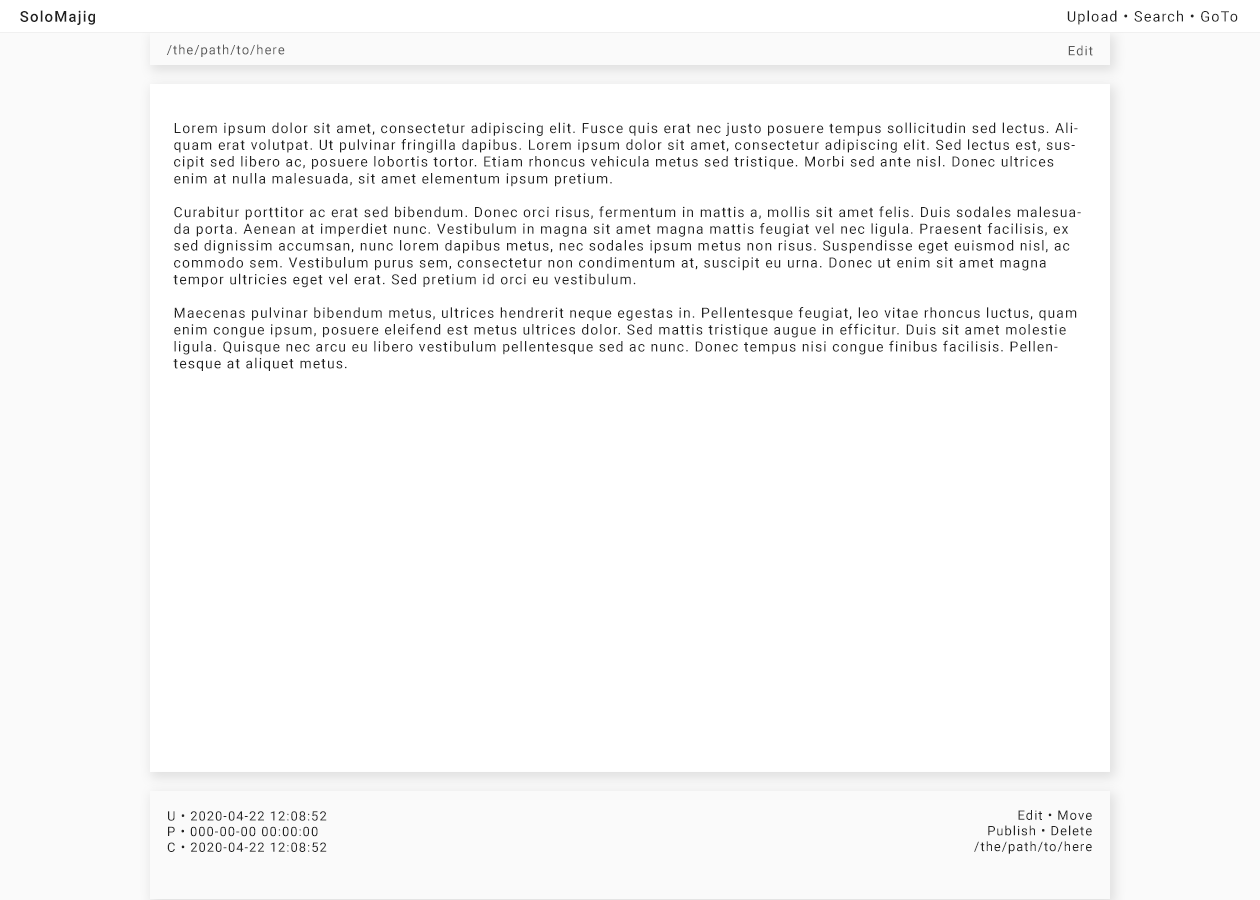
<style>
.page{position:relative;width:1260px;height:900px;background:#ffffff}
.page>*{position:absolute;margin:0}
.t1{font:15px "Roboto-Medium";letter-spacing:0.075em;color:#212121}
.t2{font:14.5px "Roboto-Regular";letter-spacing:0.075em;color:#212121}
.t3{font:13px "Roboto-Regular";letter-spacing:0.075em;color:#595959}
.t4{font:14px "Roboto-Regular";letter-spacing:0.075em;color:#212121}
.t5{font:13px "Roboto-Regular";letter-spacing:0.075em;color:#212121}
</style>
<div class="page">
<p class="t1" style="left:20px;top:10px;width:75px;height:15px">SoloMajig</p>
<p class="t2" style="left:1067px;top:10px;width:171px;height:15px">Upload • Search • GoTo</p>
<p class="t3" style="left:166px;top:44px;width:119px;height:13px">/the/path/to/here</p>
<p class="t3" style="left:1068px;top:45px;width:25px;height:11px">Edit</p>
<p class="t4" style="left:173px;top:122px;width:908px;height:249px">Lorem ipsum dolor sit amet, consectetur adipiscing elit. Fusce quis erat nec justo posuere tempus sollicitudin sed lectus. Aliquam erat volutpat. Ut pulvinar fringilla dapibus. Lorem ipsum dolor sit amet, consectetur adipiscing elit. Sed lectus est, suscipit sed libero ac, posuere lobortis tortor. Etiam rhoncus vehicula metus sed tristique. Morbi sed ante nisl. Donec ultrices enim at nulla malesuada, sit amet elementum ipsum pretium.<br><br>Curabitur porttitor ac erat sed bibendum. Donec orci risus, fermentum in mattis a, mollis sit amet felis. Duis sodales malesuada porta. Aenean at imperdiet nunc. Vestibulum in magna sit amet magna mattis feugiat vel nec ligula. Praesent facilisis, ex sed dignissim accumsan, nunc lorem dapibus metus, nec sodales ipsum metus non risus. Suspendisse eget euismod nisl, ac commodo sem. Vestibulum purus sem, consectetur non condimentum at, suscipit eu urna. Donec ut enim sit amet magna tempor ultricies eget vel erat. Sed pretium id orci eu vestibulum.<br><br>Maecenas pulvinar bibendum metus, ultrices hendrerit neque egestas in. Pellentesque feugiat, leo vitae rhoncus luctus, quam enim congue ipsum, posuere eleifend est metus ultrices dolor. Sed mattis tristique augue in efficitur. Duis sit amet molestie ligula. Quisque nec arcu eu libero vestibulum pellentesque sed ac nunc. Donec tempus nisi congue finibus facilisis. Pellentesque at aliquet metus.</p>
<p class="t5" style="left:167px;top:811px;width:160px;height:41px">U • 2020-04-22 12:08:52<br>P • 000-00-00 00:00:00<br>C • 2020-04-22 12:08:52</p>
<p class="t5" style="left:974px;top:810px;width:118px;height:44px;text-align:right">Edit • Move<br>Publish • Delete<br>/the/path/to/here</p>
</div>
